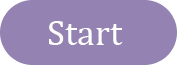
<style>
.page{position:relative;width:177px;height:65px;background:#9482b2}
.page>*{position:absolute;margin:0}
.t1{font:36px "Cambria";color:#ffffff}
</style>
<div class="page">
<p class="t1" style="left:49px;top:21px;width:74px;height:24px">Start</p>
</div>
